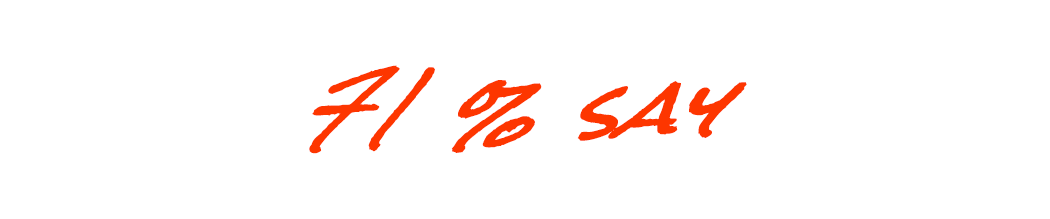
<style>
.page{position:relative;width:1050px;height:219px;background:#ffffff}
.page>*{position:absolute;margin:0}
.t1{font:73.3px "RockSalt";letter-spacing:0.02em;color:#fd3600;font-weight:bold;font-style:italic}
</style>
<div class="page">
<p class="t1" style="left:309px;top:65px;width:438px;height:89px">71 % say</p>
</div>
